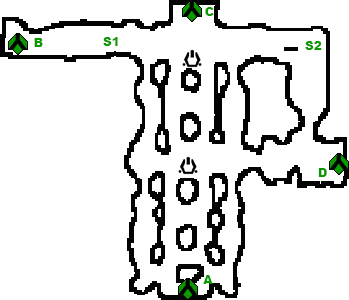
<style>
.page{position:relative;width:349px;height:300px;background:#ffffff}
.page>*{position:absolute;margin:0}
.t1{font:12px "Arial-Black";color:#0c9801}
</style>
<div class="page">
<p class="t1" style="left:205px;top:7px;width:9px;height:9px">C</p>
<p class="t1" style="left:34px;top:38px;width:9px;height:9px">B</p>
<p class="t1" style="left:103px;top:37px;width:15px;height:9px">S1</p>
<p class="t1" style="left:305px;top:41px;width:17px;height:9px">S2</p>
<p class="t1" style="left:318px;top:168px;width:9px;height:9px">D</p>
<p class="t1" style="left:203px;top:275px;width:10px;height:9px">A</p>
</div>
